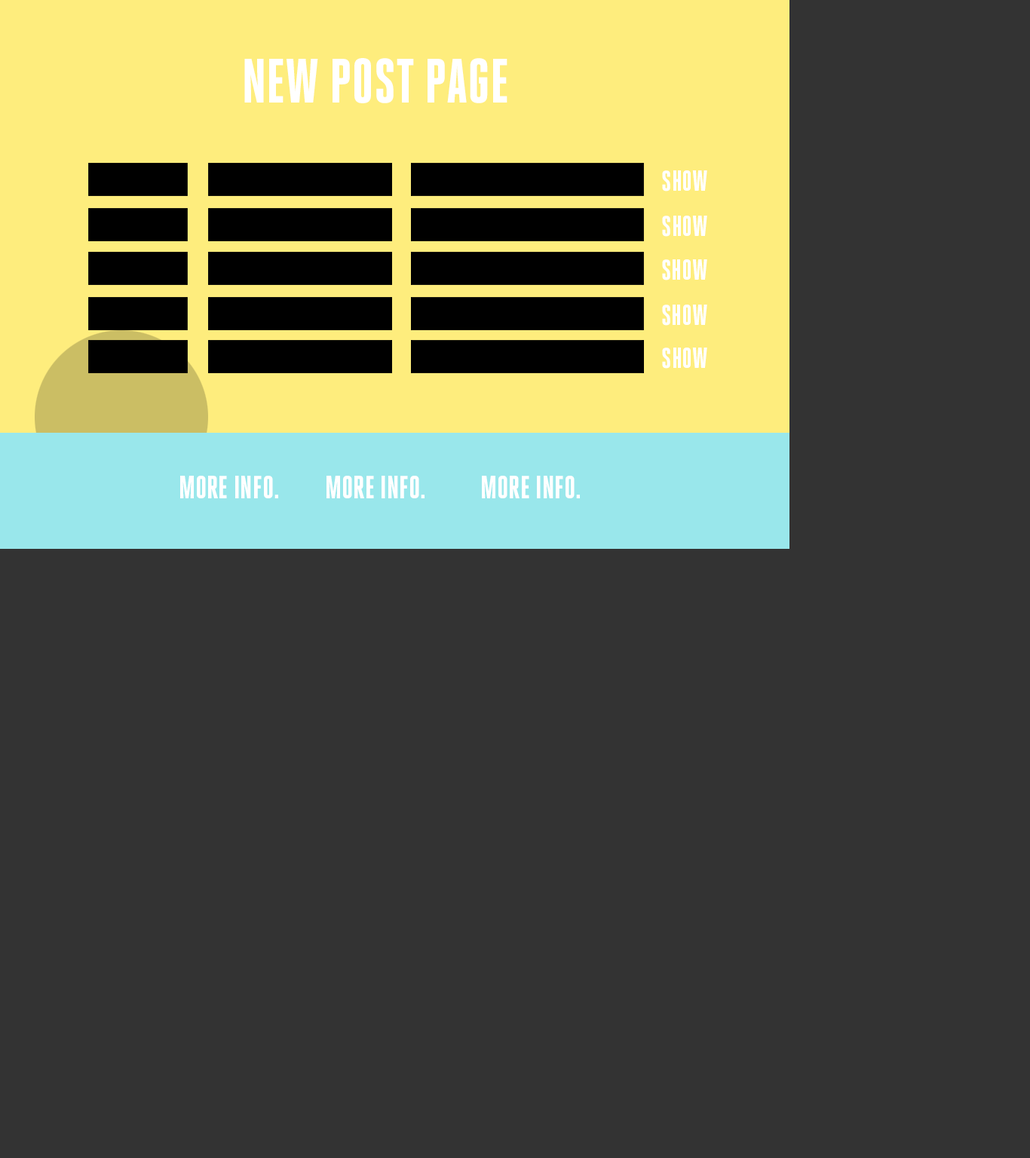
<style>
.page{position:relative;width:1030px;height:1158px;background:#333333}
.page>*{position:absolute;margin:0}
.t1{font:62.4px "HeroicCondensed-Heavy";color:#ffffff;text-transform:uppercase}
.t2{font:28.5px "HeroicCondensed-Heavy";color:#ffffff;text-transform:uppercase}
.t3{font:32.1px "HeroicCondensed-Heavy";color:#ffffff;text-transform:uppercase}
</style>
<div class="page">
<p class="t1" style="left:244px;top:58px;width:263px;height:45px">New Post page</p>
<p class="t2" style="left:662px;top:170px;width:45px;height:21px">show</p>
<p class="t2" style="left:662px;top:216px;width:45px;height:21px">show</p>
<p class="t2" style="left:662px;top:259px;width:45px;height:21px">show</p>
<p class="t2" style="left:662px;top:305px;width:45px;height:21px">show</p>
<p class="t2" style="left:662px;top:348px;width:45px;height:21px">show</p>
<p class="t3" style="left:180px;top:476px;width:98px;height:22px">More Info.</p>
<p class="t3" style="left:326px;top:476px;width:98px;height:22px">More Info.</p>
<p class="t3" style="left:482px;top:476px;width:98px;height:22px">More Info.</p>
</div>
